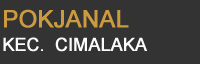
<style>
.page{position:relative;width:200px;height:64px;background:#333333}
.page>*{position:absolute;margin:0}
.t1{font:24px "ArialMT";letter-spacing:-0.02em;color:#cc9b3f;font-weight:bold}
.t2{font:18px "ArialMT";letter-spacing:-0.02em;color:#fbfcfc;font-weight:bold}
</style>
<div class="page">
<p class="t1" style="left:4px;top:9px;width:125px;height:19px">POKJANAL</p>
<p class="t2" style="left:3px;top:37px;width:144px;height:15px">KEC.  CIMALAKA</p>
</div>
